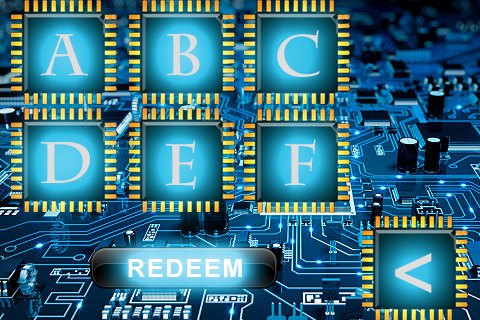
<style>
.page{position:relative;width:480px;height:320px}
.page>*{position:absolute;margin:0}
.t1{font:58.3px "CharlemagneStd-Bold";letter-spacing:0.075em;color:#dddddd}
.t2{font:75px "MyriadPro-Bold";letter-spacing:0.075em;color:#dddddd}
.t3{font:25px "Arial-BoldMT";letter-spacing:0.075em;color:#ffffff}
</style>
<div class="page">
<p class="t1" style="left:277px;top:30px;width:43px;height:47px">C</p>
<p class="t1" style="left:40px;top:34px;width:48px;height:42px">A</p>
<p class="t1" style="left:166px;top:33px;width:34px;height:43px">B</p>
<p class="t1" style="left:40px;top:142px;width:50px;height:41px">D</p>
<p class="t1" style="left:165px;top:140px;width:32px;height:50px">E</p>
<p class="t1" style="left:284px;top:139px;width:32px;height:47px">F</p>
<p class="t2" style="left:395px;top:253px;width:37px;height:40px">&lt;</p>
<p class="t3" style="left:128px;top:259px;width:114px;height:18px">REDEEM</p>
</div>
